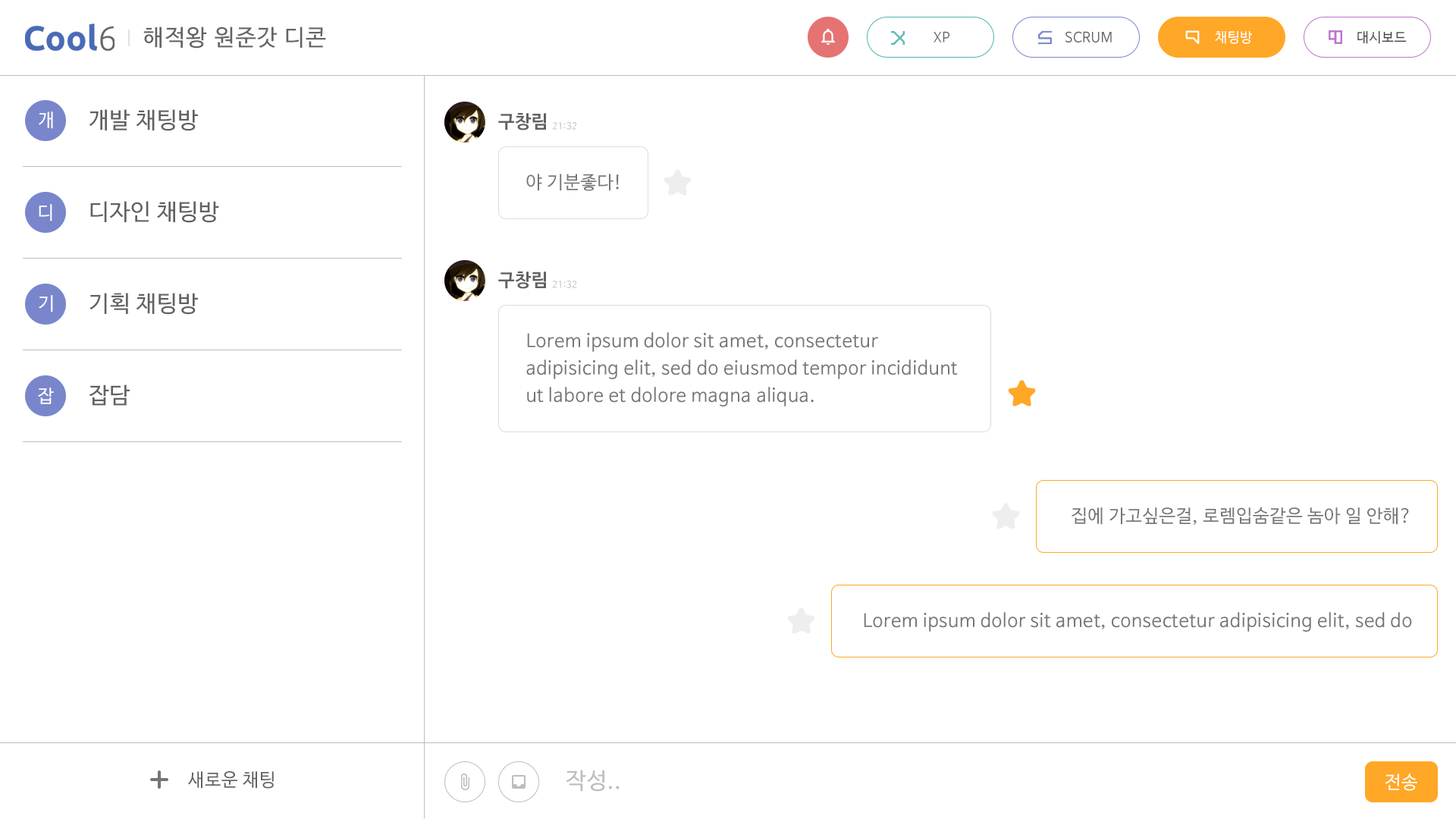
<style>
.page{position:relative;width:1456px;height:819px;background:#ffffff}
.page>*{position:absolute;margin:0}
.t1{font:22.7px "NanumBarunGothic";letter-spacing:0.05em;color:#646464}
.t2{font:13.6px "NanumBarunGothic";letter-spacing:0.025em;color:#646464}
.t3{font:13.6px "NanumBarunGothic";letter-spacing:0.025em;color:#616161}
.t4{font:13.6px "NanumBarunGothic";letter-spacing:0.025em;color:#ffffff}
.t5{font:13.6px "NanumBarunGothic";letter-spacing:0.025em;color:#424242}
.t6{font:18.2px "NanumBarunGothic";letter-spacing:0.025em;color:#ffffff}
.t7{font:22.7px "NanumBarunGothic";letter-spacing:0.025em;color:#616161}
.t8{font:18.2px "NanumBarunGothicBold";letter-spacing:0.025em;color:#616161}
.t9{font:9.1px "NanumBarunGothic";letter-spacing:0.025em;color:#bdbdbd}
.t10{font:18.2px "NanumBarunGothic";letter-spacing:0.025em;color:#757575}
.t11{font:18.2px/27.3px "NanumBarunGothic";letter-spacing:0.025em;color:#757575}
.t12{font:18.2px "NanumBarunGothic";letter-spacing:0.025em;color:#616161}
.t13{font:22.7px "NanumBarunGothic";letter-spacing:0.025em;color:#bdbdbd}
</style>
<div class="page">
<p class="t1" style="left:143px;top:27px;width:183px;height:22px">해적왕 원준갓 디콘</p>
<p class="t2" style="left:933px;top:31px;width:16px;height:11px">XP</p>
<p class="t3" style="left:1065px;top:31px;width:47px;height:11px">SCRUM</p>
<p class="t4" style="left:1215px;top:31px;width:37px;height:13px">채팅방</p>
<p class="t5" style="left:1357px;top:31px;width:50px;height:13px">대시보드</p>
<p class="t6" style="left:39px;top:111px;width:14px;height:18px">개</p>
<p class="t7" style="left:89px;top:109px;width:109px;height:22px">개발 채팅방</p>
<p class="t8" style="left:498px;top:113px;width:48px;height:17px">구창림</p>
<p class="t9" style="left:553px;top:122px;width:23px;height:8px">21:32</p>
<p class="t10" style="left:526px;top:174px;width:93px;height:17px">야 기분좋다!</p>
<p class="t6" style="left:39px;top:204px;width:13px;height:17px">디</p>
<p class="t7" style="left:90px;top:201px;width:129px;height:22px">디자인 채팅방</p>
<p class="t8" style="left:498px;top:271px;width:48px;height:18px">구창림</p>
<p class="t9" style="left:553px;top:281px;width:23px;height:7px">21:32</p>
<p class="t7" style="left:89px;top:293px;width:109px;height:22px">기획 채팅방</p>
<p class="t6" style="left:39px;top:295px;width:14px;height:17px">기</p>
<p class="t11" style="left:526px;top:332px;width:432px;height:74px">Lorem ipsum dolor sit amet, consectetur <br>adipisicing elit, sed do eiusmod tempor incididunt <br>ut labore et dolore magna aliqua.</p>
<p class="t6" style="left:38px;top:388px;width:16px;height:16px">잡</p>
<p class="t7" style="left:89px;top:384px;width:41px;height:22px">잡담</p>
<p class="t10" style="left:1071px;top:507px;width:338px;height:18px">집에 가고싶은걸, 로렘입숨같은 놈아 일 안해?</p>
<p class="t10" style="left:864px;top:612px;width:548px;height:20px">Lorem ipsum dolor sit amet, consectetur adipisicing elit, sed do</p>
<p class="t12" style="left:187px;top:771px;width:87px;height:18px">새로운 채팅</p>
<p class="t13" style="left:566px;top:770px;width:54px;height:22px">작성..</p>
<p class="t6" style="left:1385px;top:773px;width:32px;height:18px">전송</p>
</div>
